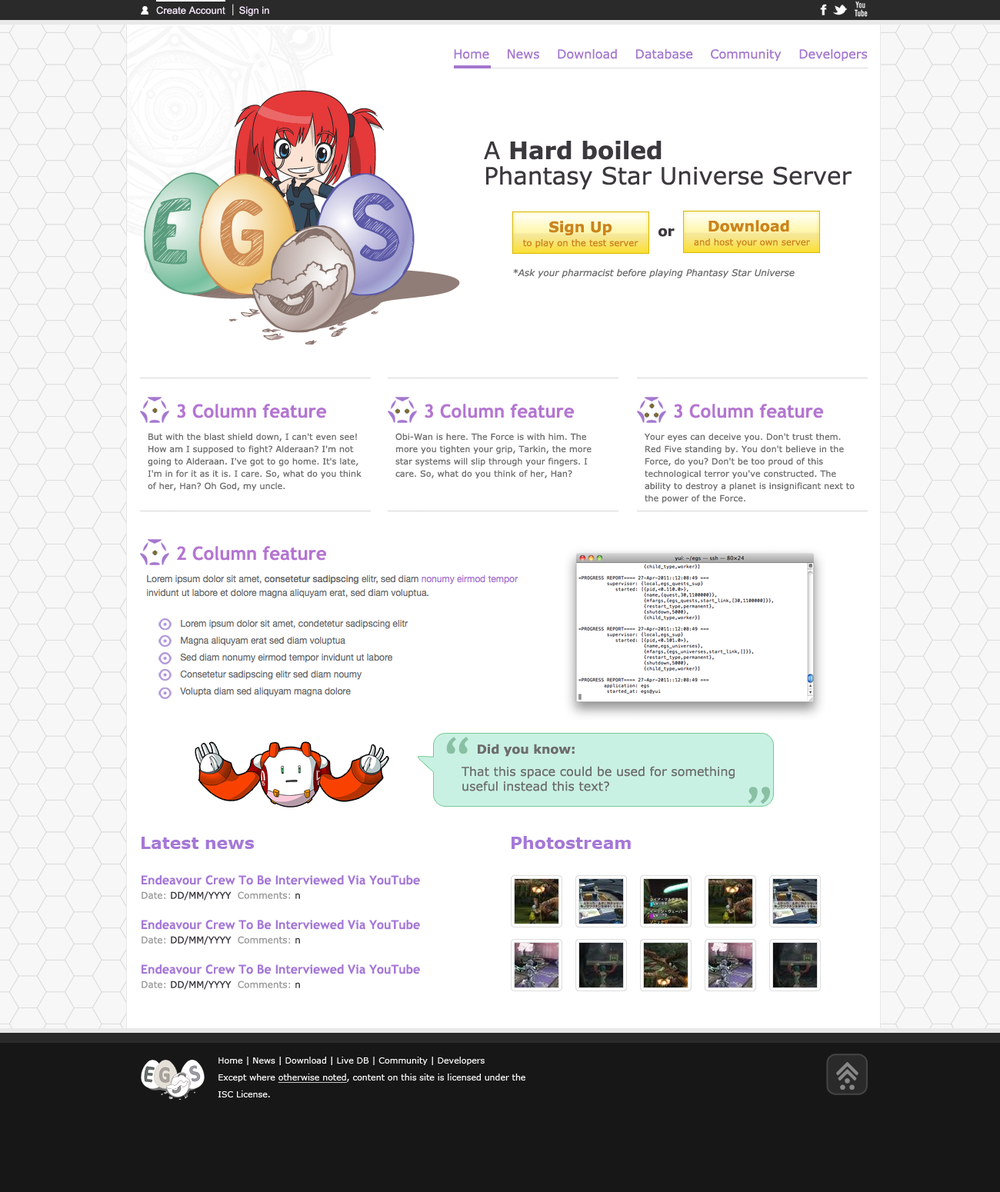
<style>
.page{position:relative;width:1000px;height:1192px;background:#ffffff}
.page>*{position:absolute;margin:0}
.t1{font:15.4px "ArialMT";scale:0.55 1}
.t2{font:10px "ArialMT";color:#f5e8fc}
.t3{font:12.3px "Verdana";color:#a477cf}
.t4{font:23.8px/12.7px "Verdana";color:#3b383e}
.t5{font:23.8px/12.7px "Verdana-Bold";color:#3b383e}
.t6{font:14.7px "Verdana-Bold";color:#cb841d}
.t7{font:13.8px "Verdana-Bold";color:#3b383e}
.t8{font:9px "Verdana";color:#cb841d}
.t9{font:9.2px "Verdana-Italic";color:#6d6d6d}
.t10{font:18.5px "TrebuchetMS-Bold";color:#b475d1}
.t11{font:8.5px/12.3px "Verdana";color:#6d6d6d}
.t12{font:55.8px "TrebuchetMS";color:#89c0a4}
.t13{font:12.3px "Verdana-Bold";color:#6d6d6d}
.t14{font:12.3px "Verdana";color:#6d6d6d}
.t15{font:16.9px "Verdana-Bold";color:#a578d7}
.t16{font:12.3px "TrebuchetMS-Bold";color:#a578d7}
.t17{font:9.2px "Verdana";color:#3b383e}
.t18{font:9.2px "Verdana";color:#999999}
.t19{font:8.5px/17.1px "Verdana";color:#ffffff}
.t20{font:8.5px/17.1px "Verdana";color:#ffffff;text-decoration:underline}
</style>
<div class="page">
<p class="t1" style="left:232px;top:4px;width:2px;height:11px">I</p>
<p class="t2" style="left:156px;top:6px;width:113px;height:10px">Create Account     Sign in</p>
<p class="t3" style="left:454px;top:48px;width:414px;height:14px">Home    News    Download    Database    Community    Developers</p>
<p class="t4" style="left:484px;top:141px;width:368px;height:49px">A <span class="t5">Hard boiled<br></span> <br>Phantasy Star Universe Server</p>
<p class="t6" style="left:549px;top:221px;width:63px;height:14px">Sign Up</p>
<p class="t6" style="left:708px;top:220px;width:81px;height:12px">Download</p>
<p class="t7" style="left:658px;top:228px;width:17px;height:9px">or</p>
<p class="t8" style="left:523px;top:239px;width:115px;height:9px">to play on the test server</p>
<p class="t8" style="left:694px;top:238px;width:116px;height:10px">and host your own server</p>
<p class="t9" style="left:513px;top:268px;width:282px;height:10px">*Ask your pharmacist before playing Phantasy Star Universe</p>
<p class="t10" style="left:177px;top:404px;width:149px;height:14px">3 Column feature</p>
<p class="t10" style="left:425px;top:404px;width:149px;height:14px">3 Column feature</p>
<p class="t10" style="left:674px;top:404px;width:149px;height:14px">3 Column feature</p>
<p class="t11" style="left:148px;top:433px;width:214px;height:59px">But with the blast shield down, I can't even see! How am I supposed to fight? Alderaan? I'm not going to Alderaan. I've got to go home. It's late, I'm in for it as it is. I care. So, what do you think of her, Han? Oh God, my uncle.</p>
<p class="t11" style="left:395px;top:433px;width:197px;height:46px">Obi-Wan is here. The Force is with him. The more you tighten your grip, Tarkin, the more star systems will slip through your fingers. I care. So, what do you think of her, Han?</p>
<p class="t11" style="left:645px;top:433px;width:210px;height:71px">Your eyes can deceive you. Don't trust them. Red Five standing by. You don't believe in the Force, do you? Don't be too proud of this technological terror you've constructed. The ability to destroy a planet is insignificant next to the power of the Force.</p>
<p class="t10" style="left:177px;top:546px;width:149px;height:15px">2 Column feature</p>
<p class="t12" style="left:446px;top:737px;width:22px;height:18px">“</p>
<p class="t13" style="left:478px;top:744px;width:97px;height:13px">Did you know:</p>
<p class="t14" style="left:462px;top:766px;width:273px;height:26px">That this space could be used for something<br>useful instead this text?</p>
<p class="t12" style="left:748px;top:787px;width:22px;height:18px">”</p>
<p class="t15" style="left:142px;top:837px;width:112px;height:12px">Latest news</p>
<p class="t15" style="left:512px;top:836px;width:119px;height:13px">Photostream</p>
<p class="t16" style="left:142px;top:875px;width:278px;height:10px">Endeavour Crew To Be Interviewed Via YouTube</p>
<p class="t17" style="left:142px;top:892px;width:158px;height:9px"><span class="t18">Date:</span> DD/MM/YYYY  <span class="t18">Comments:</span> n</p>
<p class="t16" style="left:142px;top:920px;width:278px;height:10px">Endeavour Crew To Be Interviewed Via YouTube</p>
<p class="t17" style="left:142px;top:936px;width:158px;height:9px"><span class="t18">Date:</span> DD/MM/YYYY  <span class="t18">Comments:</span> n</p>
<p class="t16" style="left:142px;top:965px;width:278px;height:10px">Endeavour Crew To Be Interviewed Via YouTube</p>
<p class="t17" style="left:142px;top:981px;width:158px;height:9px"><span class="t18">Date:</span> DD/MM/YYYY  <span class="t18">Comments:</span> n</p>
<p class="t19" style="left:218px;top:1057px;width:307px;height:41px">Home | News | Download | Live DB | Community | Developers<br>Except where <span class="t20">otherwise noted</span>, content on this site is licensed under the <br>ISC License.</p>
</div>
